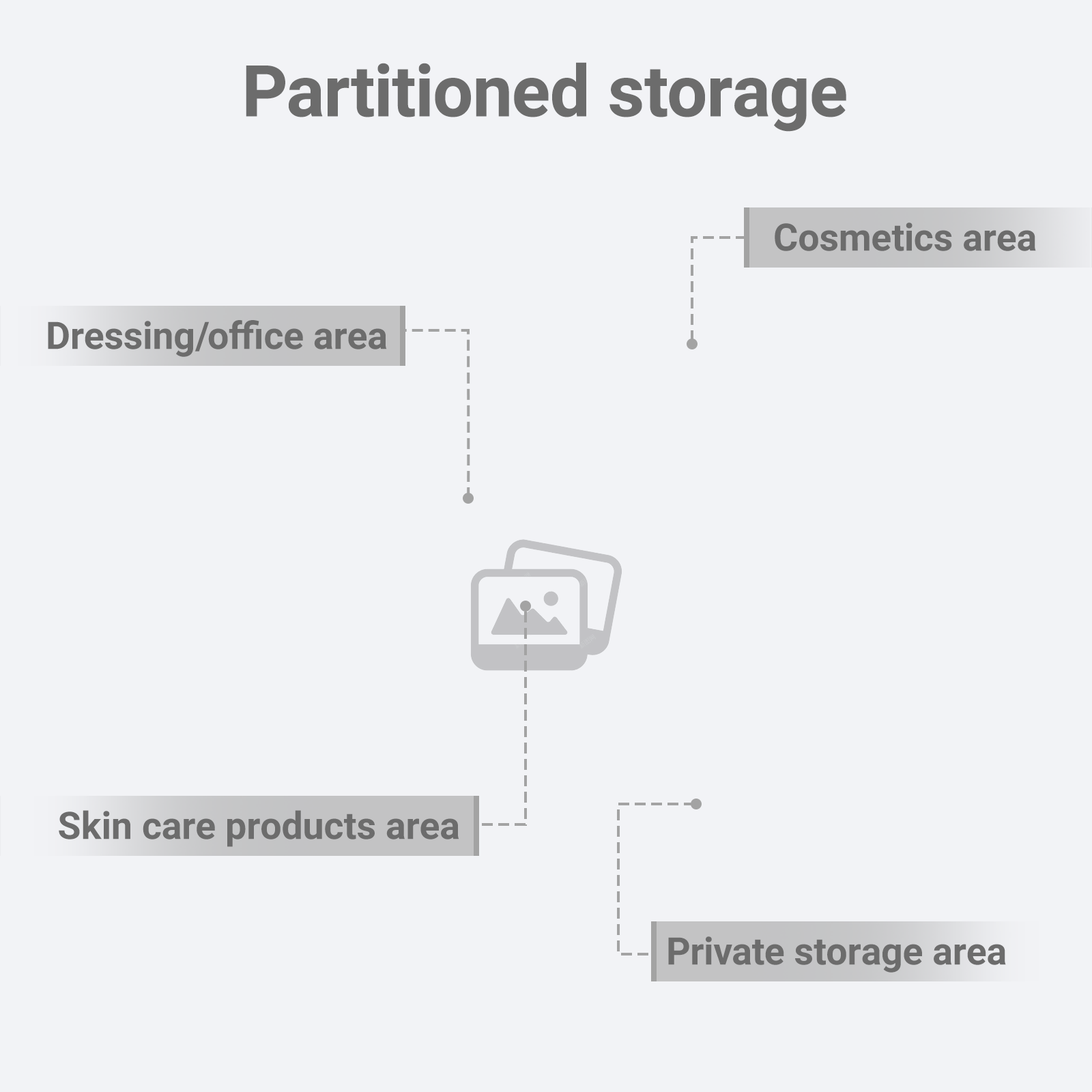
<style>
.page{position:relative;width:1092px;height:1092px;background:#f2f3f6}
.page>*{position:absolute;margin:0}
.t1{font:71.3px "Roboto-Bold";color:#6c6c6c}
.t2{font:37.9px "Roboto-Bold";color:#6c6c6c}
</style>
<div class="page">
<p class="t1" style="left:246px;top:62px;width:600px;height:70px">Partitioned storage</p>
<p class="t2" style="left:775px;top:222px;width:261px;height:29px">Cosmetics area</p>
<p class="t2" style="left:48px;top:320px;width:339px;height:37px">Dressing/office area</p>
<p class="t2" style="left:59px;top:810px;width:400px;height:37px">Skin care products area</p>
<p class="t2" style="left:668px;top:936px;width:338px;height:37px">Private storage area</p>
</div>
